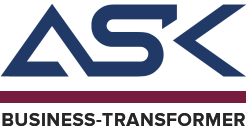
<style>
.page{position:relative;width:247px;height:129px;background:#ffffff}
.page>*{position:absolute;margin:0}
.t1{font:19px "ProximaNova-Bold";letter-spacing:0.025em;color:#262626}
</style>
<div class="page">
<p class="t1" style="left:2px;top:113px;width:243px;height:13px">BUSINESS-TRANSFORMER</p>
</div>
